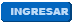
<style>
.page{position:relative;width:73px;height:23px;background:#0266bf}
.page>*{position:absolute;margin:0}
.t1{font:10px "Arial-Black";color:#bcdcf8}
</style>
<div class="page">
<p class="t1" style="left:11px;top:8px;width:58px;height:7px">INGRESAR</p>
</div>
